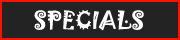
<style>
.page{position:relative;width:180px;height:40px;background:#232323}
.page>*{position:absolute;margin:0}
.t1{font:22px "Jokerman-Regular";color:#ffffff}
</style>
<div class="page">
<p class="t1" style="left:34px;top:10px;width:110px;height:21px">SPECIALS</p>
</div>
